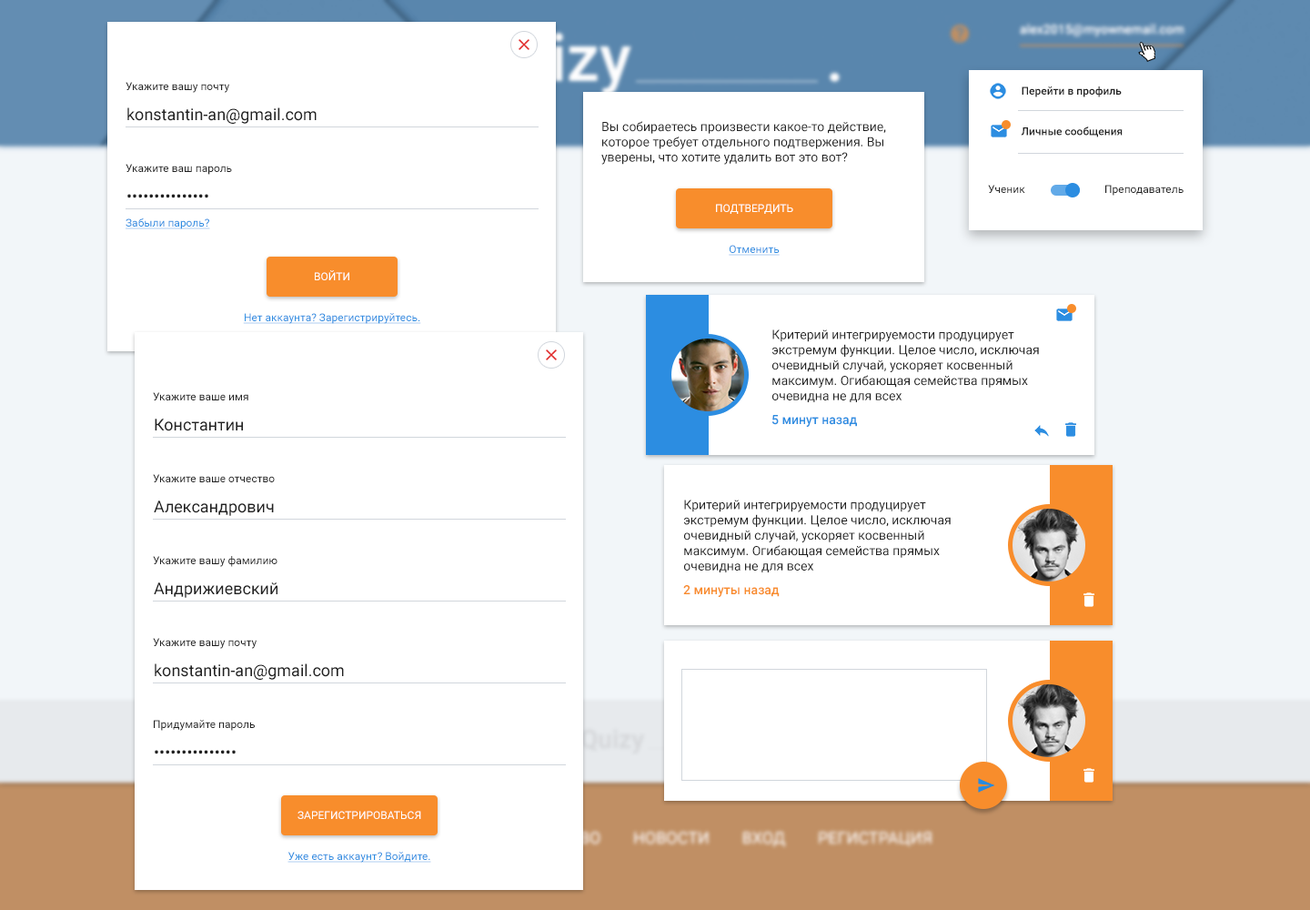
<style>
.page{position:relative;width:1310px;height:910px;background:#ffffff}
.page>*{position:absolute;margin:0}
.t1{font:10.9px "Roboto-Regular";color:#212121}
.t2{font:10.9px "Roboto-Medium";color:#212121}
.t3{font:16.4px "Roboto-Regular";color:#212121}
.t4{font:12.7px "Roboto-Regular";color:#212121}
.t5{font:10.9px "Roboto-Regular";color:#ffffff;text-transform:uppercase}
.t6{font:10.9px "Roboto-Regular";color:#2c8de1;text-decoration:underline}
.t7{font:12.7px "Roboto-Medium";color:#2c8de1}
.t8{font:12.7px "Roboto-Medium";color:#f88d2c}
</style>
<div class="page">
<p class="t1" style="left:126px;top:82px;width:103px;height:11px">Укажите вашу почту</p>
<p class="t2" style="left:1021px;top:86px;width:102px;height:51px">Перейти в профиль<br>Личные сообщения</p>
<p class="t3" style="left:127px;top:107px;width:190px;height:17px">konstantin-an@gmail.com</p>
<p class="t4" style="left:602px;top:121px;width:284px;height:44px">Вы собираетесь произвести какое-то действие, которое требует отдельного подтвержения. Вы уверены, что хотите удалить вот это вот?</p>
<p class="t1" style="left:126px;top:164px;width:106px;height:11px">Укажите ваш пароль</p>
<p class="t1" style="left:988px;top:185px;width:38px;height:8px">Ученик</p>
<p class="t1" style="left:1106px;top:185px;width:78px;height:11px">Преподаватель</p>
<p class="t3" style="left:127px;top:194px;width:81px;height:4px">•••••••••••••••</p>
<p class="t5" style="left:716px;top:204px;width:78px;height:10px">Подтвердить</p>
<p class="t6" style="left:126px;top:217px;width:84px;height:12px">Забыли пароль?</p>
<p class="t6" style="left:729px;top:245px;width:51px;height:11px">Отменить</p>
<p class="t5" style="left:315px;top:270px;width:34px;height:10px">Войти</p>
<p class="t6" style="left:243px;top:313px;width:178px;height:11px">Нет аккаунта? Зарегистрируйтесь.</p>
<p class="t4" style="left:773px;top:329px;width:266px;height:73px">Критерий интегрируемости продуцирует экстремум функции. Целое число, исключая очевидный случай, ускоряет косвенный максимум. Огибающая семейства прямых очевидна не для всех</p>
<p class="t1" style="left:153px;top:392px;width:95px;height:8px">Укажите ваше имя</p>
<p class="t3" style="left:155px;top:419px;width:88px;height:12px">Константин</p>
<p class="t7" style="left:773px;top:415px;width:84px;height:12px">5 минут назад</p>
<p class="t1" style="left:153px;top:474px;width:122px;height:8px">Укажите ваше отчество</p>
<p class="t3" style="left:154px;top:500px;width:120px;height:16px">Александрович</p>
<p class="t4" style="left:684px;top:500px;width:267px;height:72px">Критерий интегрируемости продуцирует экстремум функции. Целое число, исключая очевидный случай, ускоряет косвенный максимум. Огибающая семейства прямых очевидна не для всех</p>
<p class="t1" style="left:153px;top:556px;width:125px;height:11px">Укажите вашу фамилию</p>
<p class="t3" style="left:154px;top:582px;width:124px;height:16px">Андрижиевский</p>
<p class="t8" style="left:683px;top:585px;width:97px;height:12px">2 минуты назад</p>
<p class="t1" style="left:153px;top:638px;width:104px;height:11px">Укажите вашу почту</p>
<p class="t3" style="left:155px;top:663px;width:189px;height:17px">konstantin-an@gmail.com</p>
<p class="t1" style="left:154px;top:720px;width:101px;height:11px">Придумайте пароль</p>
<p class="t3" style="left:155px;top:750px;width:81px;height:4px">•••••••••••••••</p>
<p class="t5" style="left:298px;top:811px;width:123px;height:8px">Зарегистрироваться</p>
<p class="t6" style="left:288px;top:852px;width:143px;height:11px">Уже есть аккаунт? Войдите.</p>
</div>
